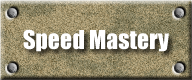
<style>
.page{position:relative;width:192px;height:80px}
.page>*{position:absolute;margin:0}
.t1{font:24px "Impact";color:#ffffff}
</style>
<div class="page">
<p class="t1" style="left:23px;top:29px;width:146px;height:23px">Speed Mastery</p>
</div>
